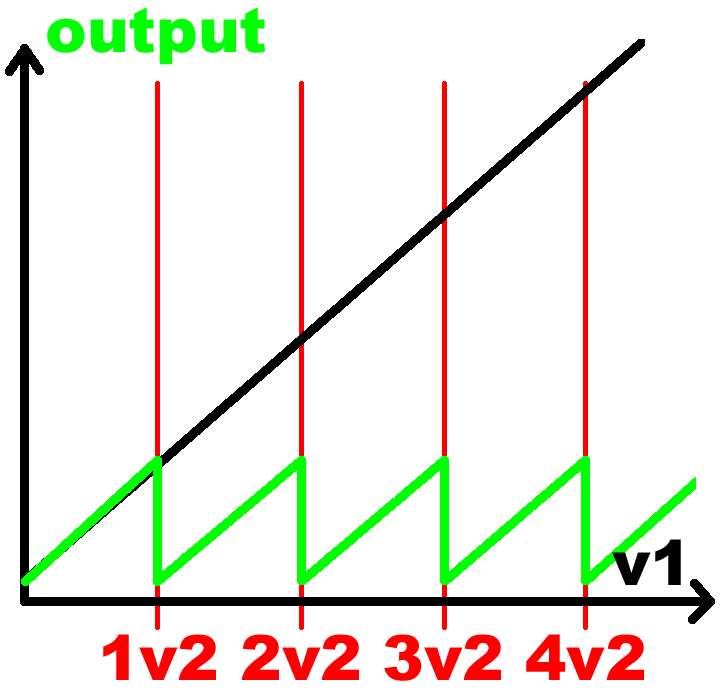
<style>
.page{position:relative;width:720px;height:700px;background:#ffffff}
.page>*{position:absolute;margin:0}
.t1{font:62.5px "Arial-Black";color:#00ff00}
.t2{font:62.5px "Arial-Black";color:#010101}
.t3{font:62.5px "Arial-Black";color:#ff0000}
</style>
<div class="page">
<p class="t1" style="left:47px;top:7px;width:218px;height:58px">output</p>
<p class="t2" style="left:612px;top:539px;width:69px;height:46px">v1</p>
<p class="t3" style="left:103px;top:634px;width:541px;height:47px">1v2 2v2 3v2 4v2</p>
</div>
